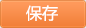
<style>
.page{position:relative;width:86px;height:28px}
.page>*{position:absolute;margin:0}
.t1{font:16px "MicrosoftYaHei";color:#ffffff}
</style>
<div class="page">
<p class="t1" style="left:26px;top:5px;width:32px;height:16px">保存</p>
</div>
